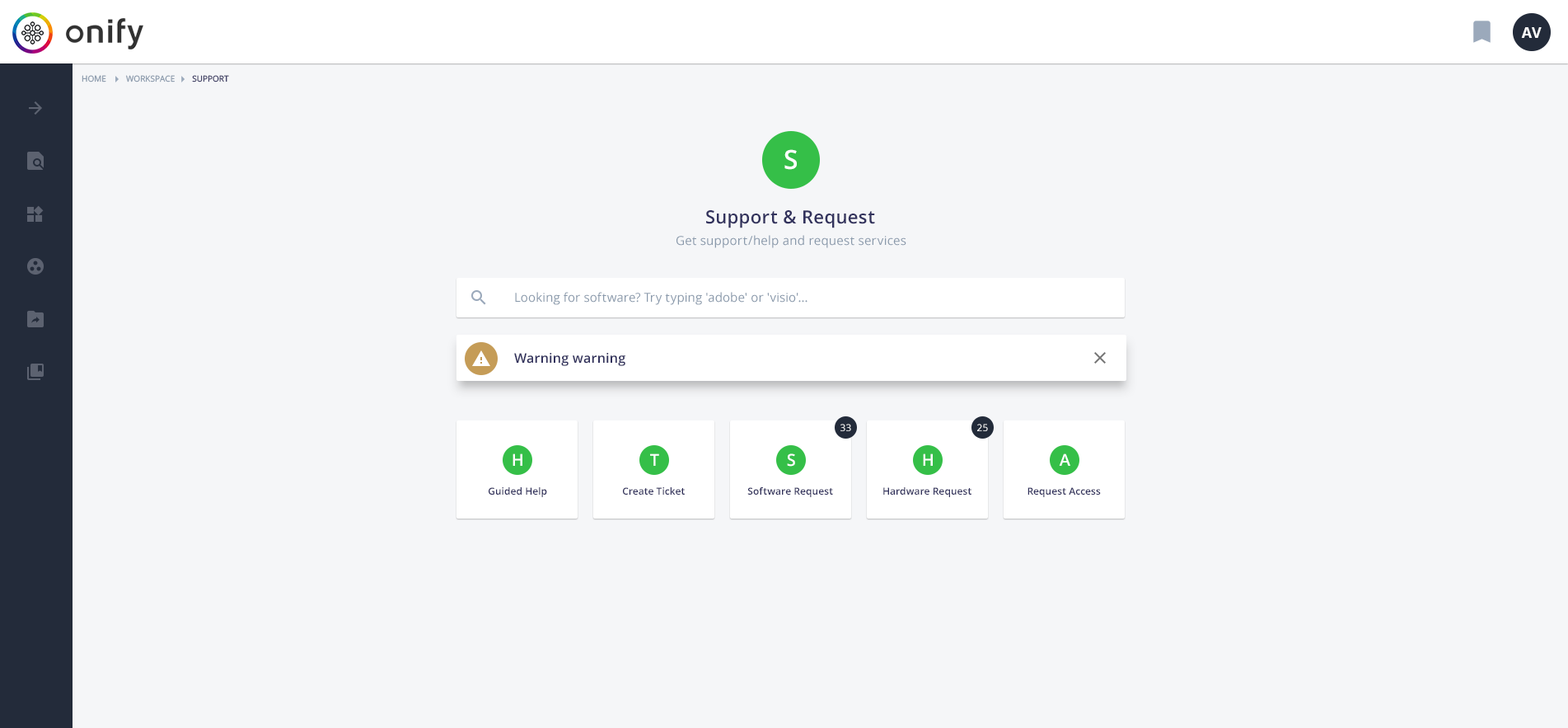
<style>
.page{position:relative;width:1568px;height:728px;background:#f5f6f8}
.page>*{position:absolute;margin:0}
.t1{font:14.8px "OpenSans-Bold";color:#ffffff;text-transform:uppercase}
.t2{font:8.2px "OpenSans";color:#8898aa;text-transform:uppercase}
.t3{font:8.2px "OpenSans";color:#32325d;text-transform:uppercase}
.t4{font:26.4px "OpenSans-Semibold";letter-spacing:0.005em;color:#ffffff}
.t5{font:18.1px "OpenSans-Semibold";letter-spacing:0.02em;color:#32325d}
.t6{font:12.4px "OpenSans";letter-spacing:0.02em;color:#8898aa}
.t7{font:12.4px "OpenSans";letter-spacing:0.01em;color:#8898aa}
.t8{font:13.2px "OpenSans-Semibold";letter-spacing:0.02em;color:#32325d}
.t9{font:9.9px "OpenSans";letter-spacing:0.005em;color:#ffffff}
.t10{font:16.5px "OpenSans-Semibold";letter-spacing:0.005em;color:#ffffff}
.t11{font:9.9px "OpenSans-Semibold";letter-spacing:0.005em;color:#32325d}
</style>
<div class="page">
<p class="t1" style="left:1521px;top:27px;width:21px;height:11px">AV</p>
<p class="t2" style="left:82px;top:75px;width:24px;height:7px">Home</p>
<p class="t2" style="left:126px;top:75px;width:49px;height:7px">Workspace</p>
<p class="t3" style="left:192px;top:75px;width:37px;height:7px">support</p>
<p class="t4" style="left:784px;top:149px;width:13px;height:21px">S</p>
<p class="t5" style="left:706px;top:210px;width:169px;height:18px">Support &amp; Request</p>
<p class="t6" style="left:676px;top:235px;width:230px;height:13px">Get support/help and request services</p>
<p class="t7" style="left:515px;top:292px;width:292px;height:13px">Looking for software? Try typing 'adobe' or 'visio'...</p>
<p class="t8" style="left:514px;top:353px;width:111px;height:13px">Warning warning</p>
<p class="t9" style="left:840px;top:424px;width:11px;height:7px">33</p>
<p class="t9" style="left:977px;top:424px;width:11px;height:7px">25</p>
<p class="t10" style="left:513px;top:453px;width:9px;height:13px">H</p>
<p class="t10" style="left:650px;top:453px;width:9px;height:13px">T</p>
<p class="t10" style="left:787px;top:453px;width:8px;height:13px">S</p>
<p class="t10" style="left:923px;top:453px;width:10px;height:13px">H</p>
<p class="t10" style="left:1059px;top:453px;width:11px;height:13px">A</p>
<p class="t11" style="left:489px;top:487px;width:58px;height:10px">Guided Help</p>
<p class="t11" style="left:623px;top:487px;width:62px;height:7px">Create Ticket</p>
<p class="t11" style="left:747px;top:487px;width:86px;height:10px">Software Request</p>
<p class="t11" style="left:883px;top:487px;width:88px;height:10px">Hardware Request</p>
<p class="t11" style="left:1027px;top:487px;width:74px;height:10px">Request Access</p>
</div>
